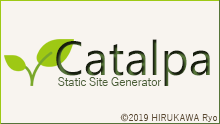
<style>
.page{position:relative;width:220px;height:124px;background:#f8f4ef}
.page>*{position:absolute;margin:0}
.t1{font:48px "SegoeUI"}
.t2{font:12px "YuGothic-Regular";letter-spacing:-0.05em;color:#4b6037}
.t3{font:9px "YuGothic-Regular";color:#5c4930}
</style>
<div class="page">
<p class="t1" style="left:56px;top:39px;width:154px;height:47px">Catalpa</p>
<p class="t2" style="left:58px;top:77px;width:103px;height:9px">Static Site Generator</p>
<p class="t3" style="left:120px;top:113px;width:97px;height:9px">©2019 HIRUKAWA Ryo</p>
</div>
